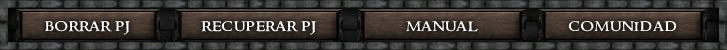
<style>
.page{position:relative;width:727px;height:50px}
.page>*{position:absolute;margin:0}
.t1{font:16px "RingbearerMedium";color:#fffefe;scale:1.17 1}
</style>
<div class="page">
<p class="t1" style="left:45px;top:21px;width:85px;height:14px">borrar pj</p>
<p class="t1" style="left:201px;top:21px;width:116px;height:14px">recuperar pj</p>
<p class="t1" style="left:406px;top:21px;width:72px;height:11px">manual</p>
<p class="t1" style="left:568px;top:21px;width:109px;height:11px">comunidad</p>
</div>
